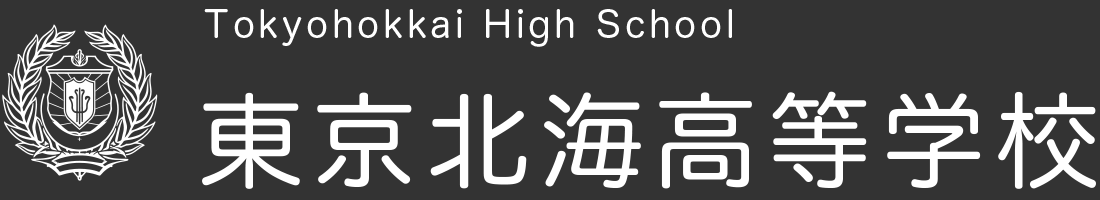
<style>
.page{position:relative;width:1100px;height:200px;background:#333333}
.page>*{position:absolute;margin:0}
.t1{font:36.7px "HiraMaruPro-W4";letter-spacing:0.1em;color:#ffffff}
.t2{font:103.1px "HiraMaruPro-W4";letter-spacing:0.1em;color:#ffffff}
</style>
<div class="page">
<p class="t1" style="left:204px;top:9px;width:528px;height:38px">Tokyohokkai High School</p>
<p class="t2" style="left:202px;top:91px;width:894px;height:98px">東京北海高等学校</p>
</div>
